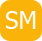
<style>
.page{position:relative;width:42px;height:41px;background:#fab308}
.page>*{position:absolute;margin:0}
.t1{font:24px "Tahoma";color:#fcfcfc}
</style>
<div class="page">
<p class="t1" style="left:5px;top:11px;width:31px;height:18px">SM</p>
</div>
